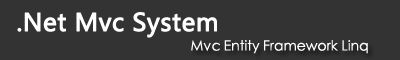
<style>
.page{position:relative;width:400px;height:60px;background:#333333}
.page>*{position:absolute;margin:0}
.t1{font:24px "MicrosoftYaHei";color:#ffffff;font-weight:bold}
.t2{font:14px "STXihei";color:#ffffff}
</style>
<div class="page">
<p class="t1" style="left:17px;top:12px;width:200px;height:26px">.Net Mvc System</p>
<p class="t2" style="left:191px;top:40px;width:177px;height:14px">Mvc Entity Framework Linq</p>
</div>
